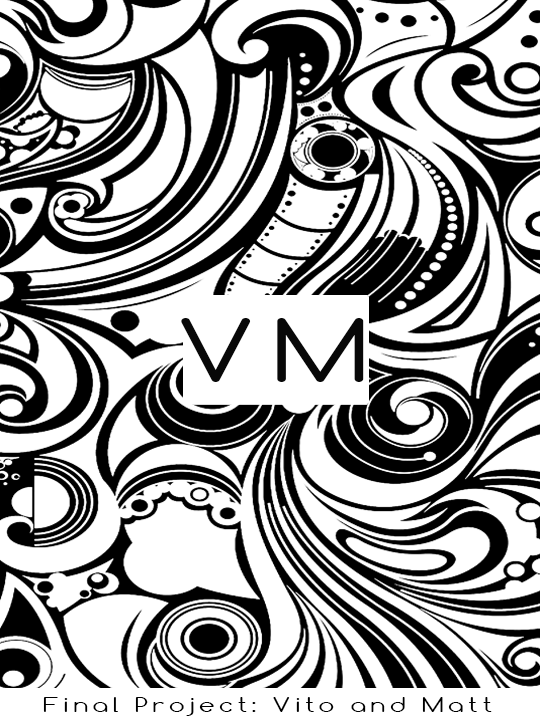
<style>
.page{position:relative;width:540px;height:720px;background:#ffffff}
.page>*{position:absolute;margin:0}
.t1{font:82.3px "Comfortaa";letter-spacing:0.17em;color:#080808;scale:1.34 1}
.t2{font:19px "Comfortaa";letter-spacing:0.17em;color:#000000;scale:1.34 1}
</style>
<div class="page">
<p class="t1" style="left:181px;top:318px;width:183px;height:64px">VM</p>
<p class="t2" style="left:43px;top:697px;width:449px;height:19px">Final Project: Vito and Matt</p>
</div>
